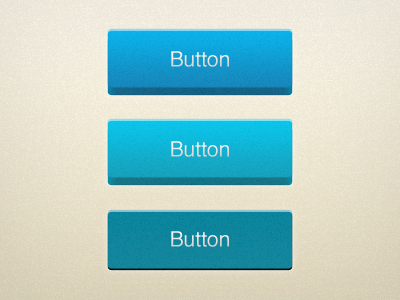
<style>
.page{position:relative;width:400px;height:300px}
.page>*{position:absolute;margin:0}
.t1{font:21.1px "Helvetica";color:#dfdfdf}
.t2{font:21.1px "Helvetica";color:#dedede}
</style>
<div class="page">
<p class="t1" style="left:171px;top:51px;width:58px;height:16px">Button</p>
<p class="t1" style="left:171px;top:141px;width:58px;height:16px">Button</p>
<p class="t2" style="left:171px;top:231px;width:58px;height:16px">Button</p>
</div>
